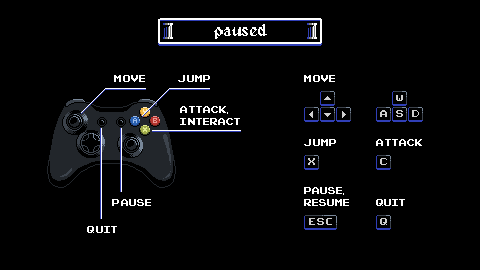
<style>
.page{position:relative;width:480px;height:270px;background:#000000}
.page>*{position:absolute;margin:0}
.t1{font:16.7px "Alagard";color:#ffffff}
.t2{font:10.4px "PixelEmulator";color:#ffffff}
</style>
<div class="page">
<p class="t1" style="left:214px;top:24px;width:53px;height:15px">paused</p>
<p class="t2" style="left:114px;top:75px;width:31px;height:7px">MOVE</p>
<p class="t2" style="left:178px;top:75px;width:32px;height:7px">JUMP</p>
<p class="t2" style="left:304px;top:75px;width:31px;height:7px">MOVE</p>
<p class="t2" style="left:180px;top:106px;width:60px;height:19px">ATTACK,<br>INTERACT</p>
<p class="t2" style="left:304px;top:139px;width:32px;height:7px">JUMP</p>
<p class="t2" style="left:376px;top:139px;width:46px;height:7px">ATTACK</p>
<p class="t2" style="left:304px;top:187px;width:45px;height:19px">PAUSE, <br>resume</p>
<p class="t2" style="left:112px;top:199px;width:39px;height:7px">PAUSE</p>
<p class="t2" style="left:376px;top:199px;width:29px;height:7px">QUIT</p>
<p class="t2" style="left:87px;top:226px;width:30px;height:7px">QUIT</p>
</div>
